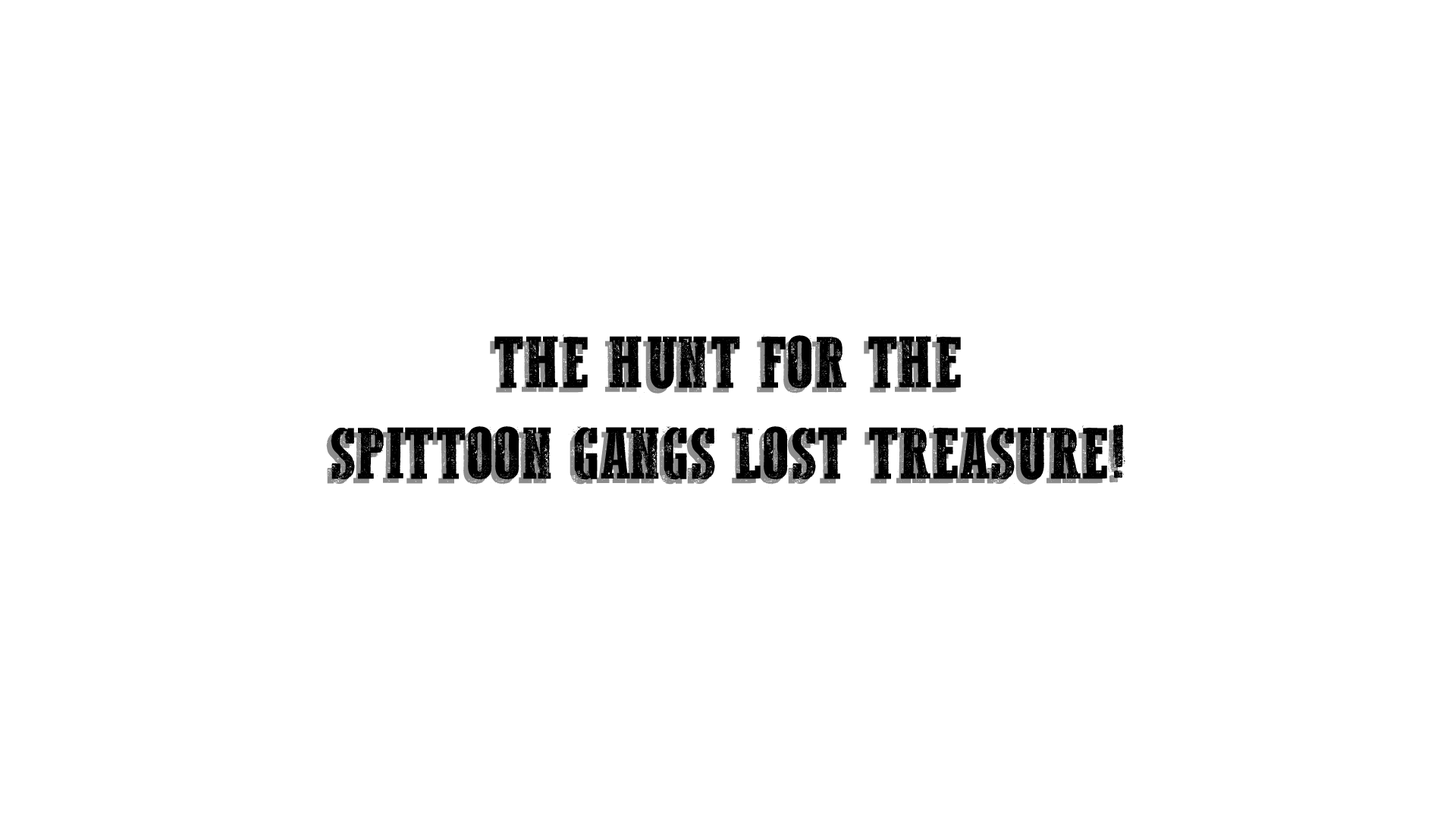
<style>
.page{position:relative;width:1456px;height:819px;background:#ffffff}
.page>*{position:absolute;margin:0}
.t1{font:75.8px "WesternBangBang";color:#000000}
</style>
<div class="page">
<p class="t1" style="left:331px;top:334px;width:794px;height:150px;text-align:center">THE HUNT FOR THE<br>SPITTOON GANGS LOST TREASURE!</p>
</div>
